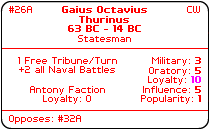
<style>
.page{position:relative;width:210px;height:130px;background:#ffffff}
.page>*{position:absolute;margin:0}
.t1{font:8px "PFTempestaSeven";color:#ff0000}
.t2{font:8px "PFTempestaSeven-Bold";color:#ff0000}
.t3{font:8px "PFTempestaSeven";color:#fe0000}
.t4{font:8px "PFTempestaSeven-Bold";color:#ff00ff}
</style>
<div class="page">
<p class="t1" style="left:9px;top:6px;width:23px;height:7px">#26A</p>
<p class="t2" style="left:62px;top:6px;width:85px;height:26px;text-align:center">Gaius Octavius<br>Thurinus<br>63 BC - 14 BC</p>
<p class="t1" style="left:187px;top:6px;width:13px;height:7px">CW</p>
<p class="t3" style="left:78px;top:35px;width:53px;height:7px">Statesman</p>
<p class="t1" style="left:18px;top:57px;width:99px;height:47px;text-align:center">1 Free Tribune/Turn<br>+2 all Naval Battles<br><br>Antony Faction<br>Loyalty: 0</p>
<p class="t1" style="left:141px;top:57px;width:60px;height:47px;text-align:right">Military: <span class="t2">3<br></span>Oratory: <span class="t2">5<br></span>Loyalty: <span class="t4">10<br></span>Influence: <span class="t2">5<br></span>Popularity: <span class="t2">1</span></p>
<p class="t1" style="left:9px;top:115px;width:72px;height:9px">Opposes: #32A</p>
</div>
